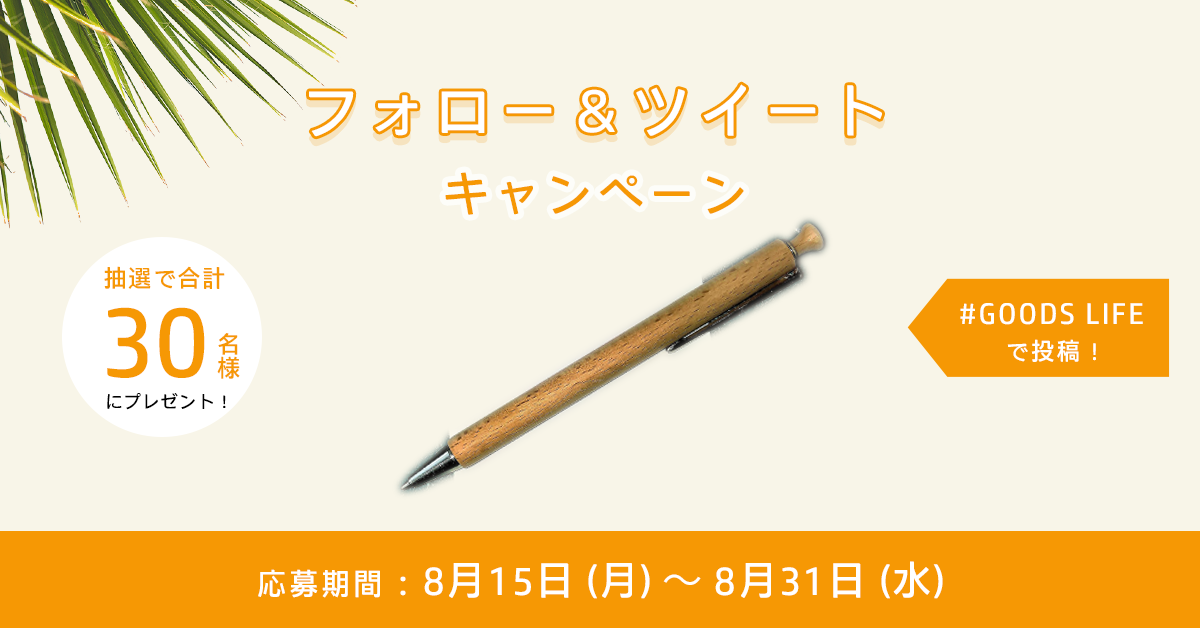
<style>
.page{position:relative;width:1200px;height:628px;background:#f8f5e8}
.page>*{position:absolute;margin:0}
.t1{font:60px "HPSimplifiedJpan-Regular";letter-spacing:0.1em;color:#ffffff;font-variant:small-caps}
.t2{font:48px "HPSimplifiedJpan-Regular";letter-spacing:0.075em;color:#f69804}
.t3{font:24px "HPSimplifiedJpan-Regular";letter-spacing:0.025em;color:#f69804}
.t4{font:30px "HPSimplifiedJpan-Regular";letter-spacing:0.075em;color:#ffffff}
.t5{font:100px "HPSimplifiedJpan-Regular";color:#f69804}
.t6{font:24px/12px "HPSimplifiedJpan-Regular";letter-spacing:0.05em;color:#f69804}
.t7{font:24px "HPSimplifiedJpan-Regular";letter-spacing:0.075em;color:#ffffff}
.t8{font:18px "HPSimplifiedJpan-Regular";letter-spacing:0.025em;color:#000000}
.t9{font:40px "HPSimplifiedJpan-Regular";letter-spacing:0.05em;color:#ffffff}
.t10{font:30px "HPSimplifiedJpan-Regular";letter-spacing:0.05em;color:#ffffff}
.t11{font:36px "HPSimplifiedJpan-Regular";letter-spacing:0.05em;color:#ffffff}
.t12{font:40px "HPSimplifiedJpan-Regular";letter-spacing:0.025em;color:#ffffff}
.t13{font:40px "KozGoPr6N-Regular";letter-spacing:0.05em;color:#ffffff}
</style>
<div class="page">
<p class="t1" style="left:309px;top:84px;width:573px;height:53px">フォロー＆ツイート</p>
<p class="t2" style="left:445px;top:172px;width:299px;height:43px">キャンペーン</p>
<p class="t3" style="left:104px;top:266px;width:121px;height:23px">抽選で合計</p>
<p class="t4" style="left:960px;top:303px;width:183px;height:22px">#GOODS LIFE</p>
<p class="t5" style="left:107px;top:307px;width:98px;height:71px">30</p>
<p class="t6" style="left:217px;top:333px;width:23px;height:46px;text-align:center">名<br><br>様</p>
<p class="t7" style="left:1007px;top:339px;width:89px;height:23px">で投稿！</p>
<p class="t8" style="left:107px;top:393px;width:119px;height:17px">にプレゼント！</p>
<p class="t9" style="left:258px;top:561px;width:685px;height:38px"><span class="t10">応募期間</span><span class="t11">：</span>8月15日<span class="t12"> (月) </span><span class="t13">～</span> 8月31日 <span class="t12">(水)</span></p>
</div>
